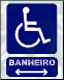
<style>
.page{position:relative;width:64px;height:80px}
.page>*{position:absolute;margin:0}
.t1{font:8px "HelveticaNowText-ExtraBold";scale:1.08 1}
</style>
<div class="page">
<p class="t1" style="left:9px;top:59px;width:47px;height:7px">BANHEIRO</p>
</div>
